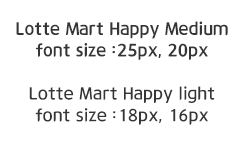
<style>
.page{position:relative;width:240px;height:144px;background:#ffffff}
.page>*{position:absolute;margin:0}
.t1{font:18px "12LotteMartHappyMedium";color:#353535}
.t2{font:18px "12LotteMartHLight";color:#353535}
</style>
<div class="page">
<p class="t1" style="left:16px;top:21px;width:212px;height:104px;text-align:center">Lotte Mart Happy Medium<br>font size :25px, 20px<br><br><span class="t2">Lotte Mart Happy light<br>font size :18px, 16px</span></p>
</div>
